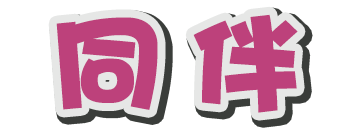
<style>
.page{position:relative;width:352px;height:128px;background:#ffffff}
.page>*{position:absolute;margin:0}
.t1{font:112px "DFPHaiBaoW12";letter-spacing:0.23em;color:#bd417b}
</style>
<div class="page">
<p class="t1" style="left:56px;top:14px;width:242px;height:99px">同伴</p>
</div>
